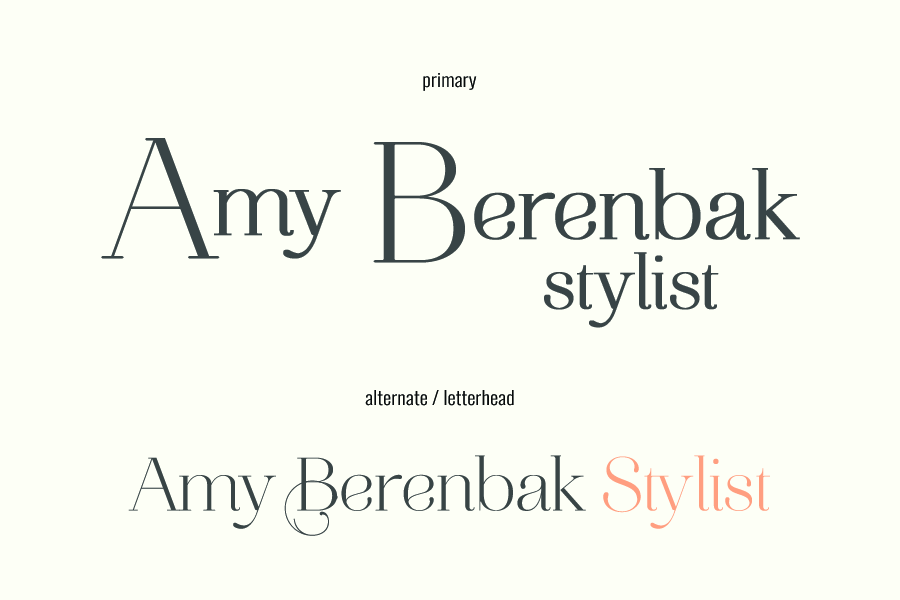
<style>
.page{position:relative;width:900px;height:600px;background:#fdfff6}
.page>*{position:absolute;margin:0}
.t1{font:18.5px "Oswald-Light";color:#080a0a;scale:1.11 1}
.t2{font:96.7px "AireBoldStd";color:#384446;font-weight:bold}
.t3{font:172px "AireBoldStd";color:#384446;font-weight:bold}
.t4{font:77.2px "AireBoldStd";color:#384446;font-weight:bold}
.t5{font:75.9px "AireBoldStd";color:#374345}
.t6{font:75.9px "AireBoldStd";color:#ff9e80}
.t7{font:112.6px "AireFleuronsPro";color:#374345}
</style>
<div class="page">
<p class="t1" style="left:423px;top:73px;width:54px;height:18px">primary</p>
<p class="t2" style="left:101px;top:138px;width:240px;height:121px"><span class="t3">A</span>my</p>
<p class="t2" style="left:373px;top:142px;width:427px;height:121px"><span class="t3">B</span>erenbak</p>
<p class="t4" style="left:544px;top:252px;width:175px;height:76px">stylist</p>
<p class="t1" style="left:365px;top:390px;width:149px;height:16px">alternate / letterhead</p>
<p class="t5" style="left:128px;top:455px;width:642px;height:74px">Amy Berenbak <span class="t6">Stylist</span></p>
<p class="t7" style="left:284px;top:480px;width:54px;height:56px">k</p>
</div>
